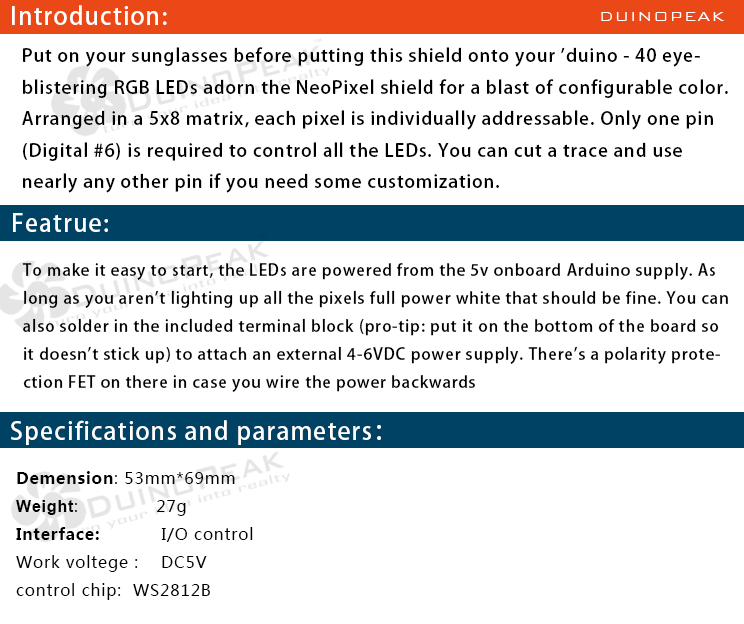
<style>
.page{position:relative;width:744px;height:624px;background:#ffffff}
.page>*{position:absolute;margin:0}
.t1{font:24px "AdobeHeitiStd-Regular";letter-spacing:0.05em;color:#ffffff}
.t2{font:18px "BankGothicBT-Light";letter-spacing:0.05em;color:#ffffff}
.t3{font:18px "AdobeHeitiStd-Regular";letter-spacing:0.05em;color:#000000}
.t4{font:16px "AdobeHeitiStd-Regular";letter-spacing:0.05em;color:#000000}
.t5{font:16px "MicrosoftYaHei";letter-spacing:0.05em;color:#000000}
.t6{font:16px "MicrosoftYaHei-Bold";letter-spacing:0.05em;color:#000000}
.t7{font:16px "Arial-BoldMT";letter-spacing:0.05em;color:#000000}
</style>
<div class="page">
<p class="t1" style="left:12px;top:5px;width:155px;height:20px">Introduction:</p>
<p class="t2" style="left:601px;top:12px;width:124px;height:9px">DUINOPEAK</p>
<p class="t3" style="left:22px;top:47px;width:706px;height:146px">Put on your sunglasses before putting this shield onto your 'duino - 40 eye-<br>blistering RGB LEDs adorn the NeoPixel shield for a blast of configurable color.<br>Arranged in a 5x8 matrix, each pixel is individually addressable. Only one pin <br>(Digital #6) is required to control all the LEDs. You can cut a trace and use <br>nearly any other pin if you need some customization.</p>
<p class="t1" style="left:13px;top:213px;width:95px;height:19px">Featrue:</p>
<p class="t4" style="left:22px;top:262px;width:706px;height:130px">To make it easy to start, the LEDs are powered from the 5v onboard Arduino supply. As <br>long as you aren't lighting up all the pixels full power white that should be fine. You can <br>also solder in the included terminal block (pro-tip: put it on the bottom of the board so <br>it doesn't stick up) to attach an external 4-6VDC power supply. There's a polarity prote-<br>ction FET on there in case you wire the power backwards</p>
<p class="t1" style="left:11px;top:420px;width:370px;height:25px">Specifications and parameters：</p>
<p class="t5" style="left:16px;top:471px;width:237px;height:129px"><span class="t6">Demension</span>: 53mm*69mm<br><span class="t7">Weight</span>:              27g<br><span class="t6">Interface:           </span>I/O control<br>Work voltege :    DC5V<br>control chip:  WS2812B</p>
</div>
